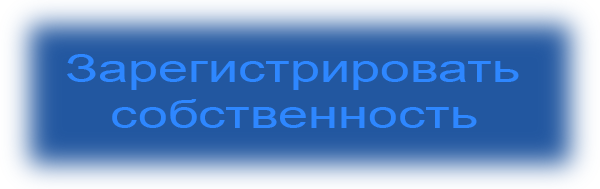
<style>
.page{position:relative;width:600px;height:189px;background:#2257a0}
.page>*{position:absolute;margin:0}
.t1{font:38.7px "ArialMT";color:#2e87ff;scale:1.4 1}
</style>
<div class="page">
<p class="t1" style="left:67px;top:54px;width:452px;height:74px">Зарегистрировать <br>   собственность</p>
</div>
